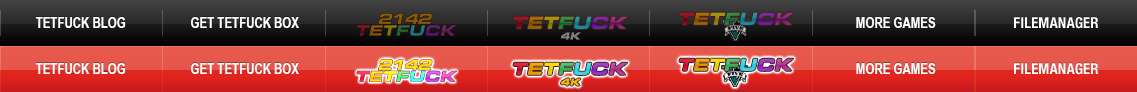
<style>
.page{position:relative;width:1137px;height:92px}
.page>*{position:absolute;margin:0}
.t1{font:14px "ArialMTNarrow-Bold";color:#ffffff}
.t2{font:17.7px "EurostileExt-BlaIta"}
.t3{font:10px "EurostileExt-BlaIta";color:#808080}
.t4{font:10px "EurostileExt-BlaIta";color:#f1b910}
</style>
<div class="page">
<p class="t1" style="left:35px;top:17px;width:91px;height:11px">TETFUCK BLOG</p>
<p class="t1" style="left:191px;top:17px;width:108px;height:11px">GET TETFUCK BOX</p>
<p class="t2" style="left:513px;top:16px;width:115px;height:13px">TETFUCK</p>
<p class="t2" style="left:679px;top:12px;width:115px;height:13px">TETFUCK</p>
<p class="t1" style="left:856px;top:17px;width:80px;height:11px">MORE GAMES</p>
<p class="t3" style="left:561px;top:32px;width:20px;height:8px">4K</p>
<p class="t1" style="left:35px;top:63px;width:91px;height:11px">TETFUCK BLOG</p>
<p class="t1" style="left:191px;top:63px;width:108px;height:11px">GET TETFUCK BOX</p>
<p class="t1" style="left:856px;top:63px;width:80px;height:11px">MORE GAMES</p>
<p class="t4" style="left:561px;top:78px;width:20px;height:8px">4K</p>
</div>
